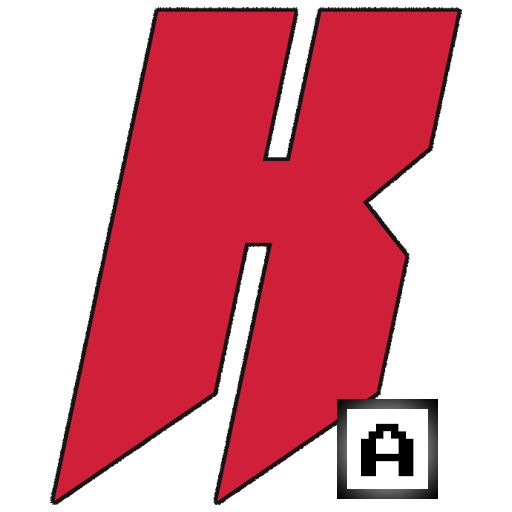
<style>
.page{position:relative;width:512px;height:512px;background:#ffffff}
.page>*{position:absolute;margin:0}
.t1{font:60px "PublicPixel";color:#000000}
</style>
<div class="page">
<p class="t1" style="left:361px;top:423px;width:53px;height:54px">A</p>
</div>
